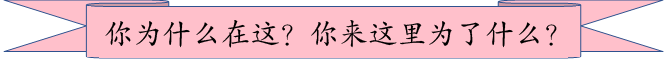
<style>
.page{position:relative;width:670px;height:62px;background:#ffc0cb}
.page>*{position:absolute;margin:0}
.t1{font:29.3px "FZKTJW--GB1-0";color:#000000}
</style>
<div class="page">
<p class="t1" style="left:105px;top:20px;width:452px;height:28px">你为什么在这？你来这里为了什么？</p>
</div>
